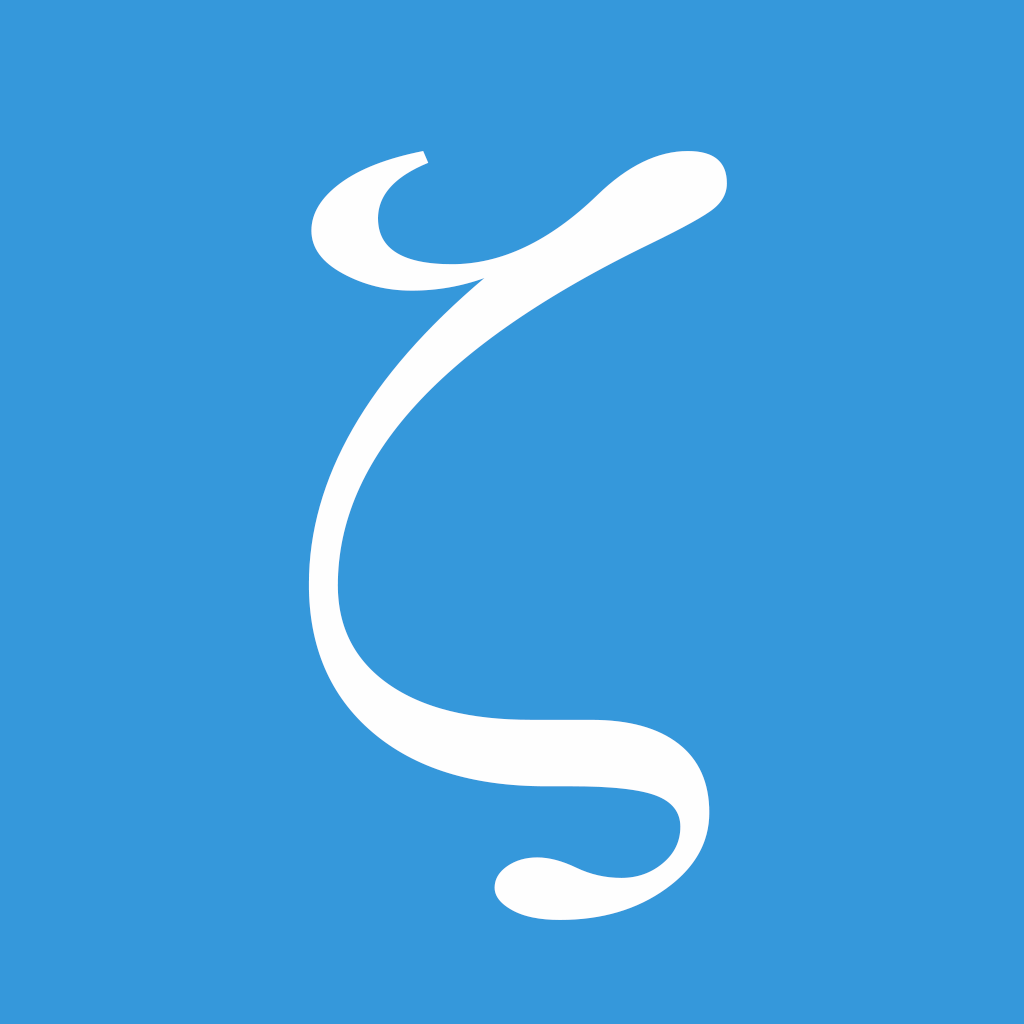
<style>
.page{position:relative;width:1024px;height:1024px;background:#3598db}
.page>*{position:absolute;margin:0}
.t1{font:975.7px "STFangsong";color:#fefefe;scale:1.29 1}
</style>
<div class="page">
<p class="t1" style="left:308px;top:151px;width:419px;height:769px">ζ</p>
</div>
